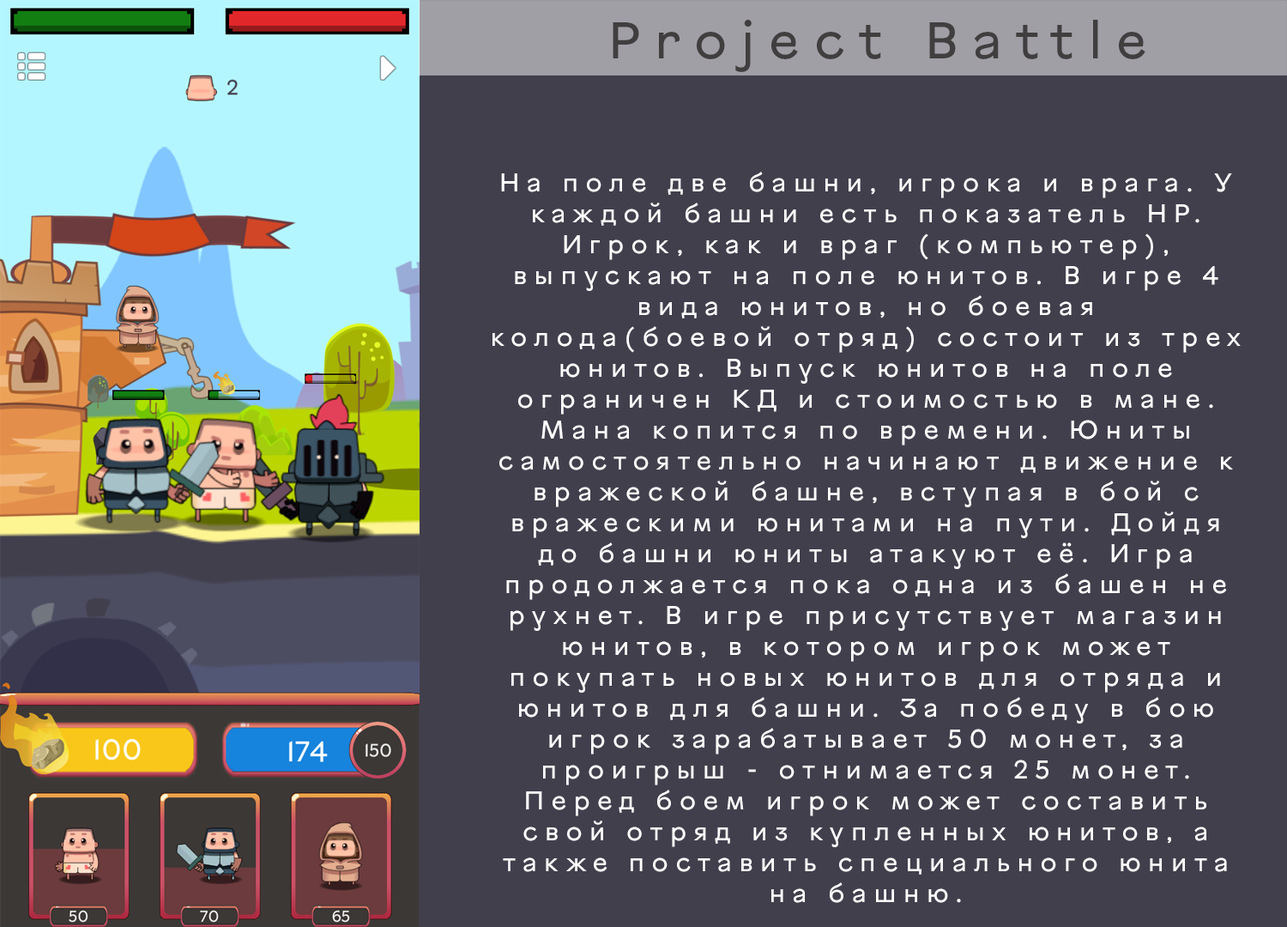
<style>
.page{position:relative;width:1287px;height:927px;background:#423f4d}
.page>*{position:absolute;margin:0}
.t1{font:51.5px "VinnytsiaSansReg";letter-spacing:0.28em;color:#403e3e}
.t2{font:25.7px "VinnytsiaSansReg";letter-spacing:0.28em;color:#ffffff}
</style>
<div class="page">
<p class="t1" style="left:613px;top:20px;width:532px;height:52px">Project Battle</p>
<p class="t2" style="left:492px;top:172px;width:749px;height:731px;text-align:center">На поле две башни, игрока и врага. У каждой башни есть показатель HP. Игрок, как и враг (компьютер), выпускают на поле юнитов. В игре 4 вида юнитов, но боевая колода(боевой отряд) состоит из трех юнитов. Выпуск юнитов на поле ограничен КД и стоимостью в мане. Мана копится по времени. Юниты самостоятельно начинают движение к вражеской башне, вступая в бой с вражескими юнитами на пути. Дойдя до башни юниты атакуют её. Игра продолжается пока одна из башен не рухнет. В игре присутствует магазин юнитов, в котором игрок может покупать новых юнитов для отряда и юнитов для башни. За победу в бою игрок зарабатывает 50 монет, за проигрыш - отнимается 25 монет. Перед боем игрок может составить свой отряд из купленных юнитов, а также поставить специального юнита на башню.</p>
</div>
